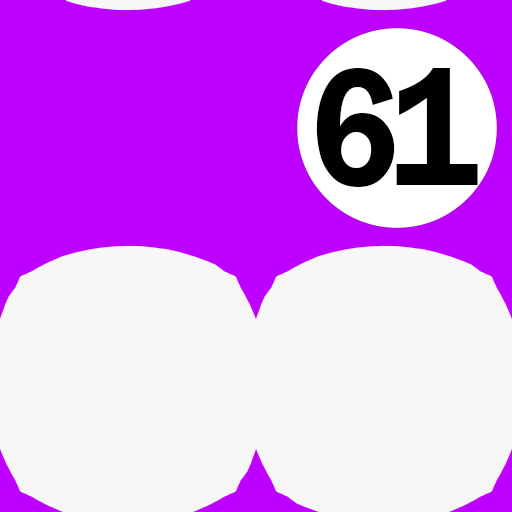
<style>
.page{position:relative;width:512px;height:512px;background:#f7f7f7}
.page>*{position:absolute;margin:0}
.t1{font:172.5px "FranklinGothic-Demi";letter-spacing:-0.05em;color:#010101;scale:0.87 1}
</style>
<div class="page">
<p class="t1" style="left:316px;top:68px;width:162px;height:119px">61</p>
</div>
